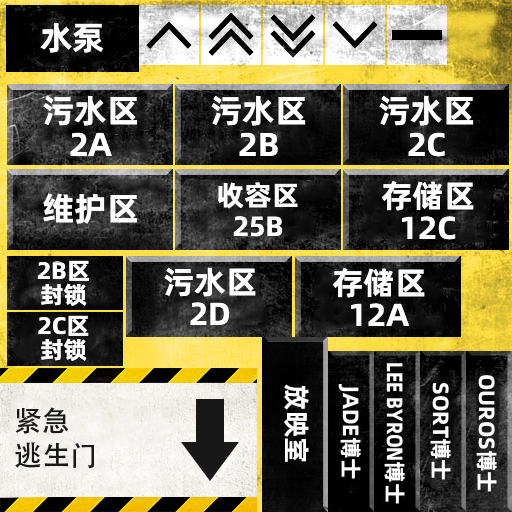
<style>
.page{position:relative;width:512px;height:512px}
.page>*{position:absolute;margin:0}
.t1{font:33px "AlibabaPuHuiTiB";color:#fefefe}
.t2{font:33px/34px "AlibabaPuHuiTiB";color:#fefefe}
.t3{font:28px/31px "AlibabaPuHuiTiB";color:#fefefe}
.t4{font:32px/32px "AlibabaPuHuiTiB";color:#fefefe}
.t5{font:24px/24px "AlibabaPuHuiTiB";color:#fefefe}
.t6{font:22px "AlibabaPuHuiTiB";color:#fefefe;scale:0.84 1}
.t7{font:22px "AlibabaPuHuiTiB";color:#fefefe}
.t8{font:27px "AlibabaPuHuiTiB";color:#fefefe}
.t9{font:28px/35px "AdobeHeitiStd-Regular";color:#181818}
</style>
<div class="page">
<p class="t1" style="left:40px;top:22px;width:64px;height:31px">水泵</p>
<p class="t2" style="left:43px;top:95px;width:95px;height:61px;text-align:center">污水区<br>2A</p>
<p class="t2" style="left:211px;top:95px;width:95px;height:61px;text-align:center">污水区<br>2B</p>
<p class="t2" style="left:379px;top:95px;width:95px;height:62px;text-align:center">污水区<br>2C</p>
<p class="t3" style="left:218px;top:182px;width:80px;height:55px;text-align:center">收容区<br>25B</p>
<p class="t4" style="left:381px;top:181px;width:93px;height:59px;text-align:center">存储区<br>12C</p>
<p class="t1" style="left:43px;top:193px;width:95px;height:31px">维护区</p>
<p class="t5" style="left:37px;top:260px;width:52px;height:46px;text-align:center">2B区<br>封锁</p>
<p class="t4" style="left:164px;top:267px;width:92px;height:58px;text-align:center">污水区<br>2D</p>
<p class="t4" style="left:332px;top:268px;width:93px;height:58px;text-align:center">存储区<br>12A</p>
<p class="t5" style="left:38px;top:315px;width:51px;height:46px;text-align:center">2C区<br>封锁</p>
<p class="t6" style="left:384px;top:363px;width:21px;height:141px;rotate:90deg">LEE BYRON<span class="t7">博士</span></p>
<p class="t7" style="left:476px;top:375px;width:21px;height:117px;rotate:90deg">OUROS博士</p>
<p class="t8" style="left:284px;top:384px;width:25px;height:78px;rotate:90deg">放映室</p>
<p class="t7" style="left:338px;top:384px;width:23px;height:95px;rotate:90deg">JADE博士</p>
<p class="t7" style="left:430px;top:383px;width:21px;height:97px;rotate:90deg">SORT博士</p>
<p class="t9" style="left:15px;top:407px;width:80px;height:62px">紧急<br>逃生门</p>
</div>
